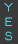
<style>
.page{position:relative;width:18px;height:44px;background:#3a3a3a}
.page>*{position:absolute;margin:0}
.t1{font:12px "MS Sans Serif";color:#57cbde}
</style>
<div class="page">
<p class="t1" style="left:4px;top:3px;width:9px;height:38px;text-align:center">Y<br>E<br>S</p>
</div>
